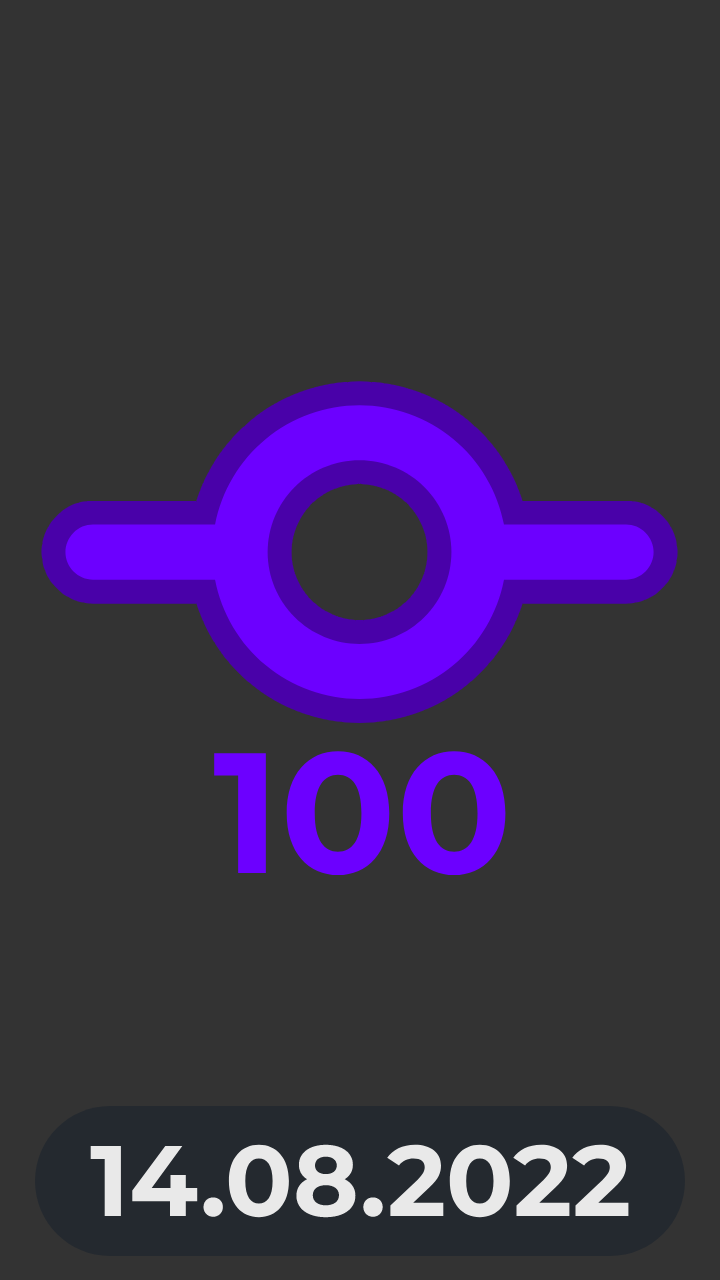
<style>
.page{position:relative;width:720px;height:1280px;background:#333333}
.page>*{position:absolute;margin:0}
.t1{font:171px "Montserrat-Bold";color:#6c00ff}
.t2{font:100px "Montserrat-Bold";color:#e9e9e9}
</style>
<div class="page">
<p class="t1" style="left:214px;top:751px;width:292px;height:125px">100</p>
<p class="t2" style="left:90px;top:1144px;width:539px;height:74px">14.08.2022</p>
</div>
